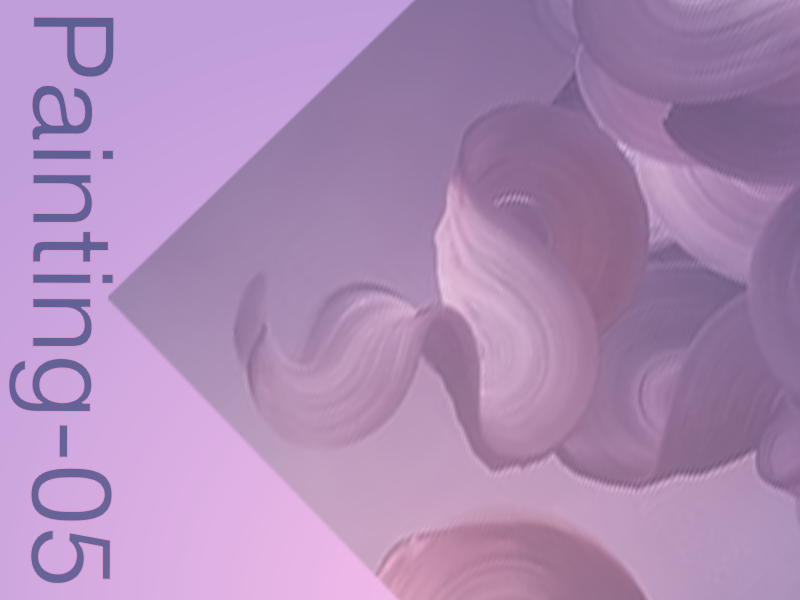
<style>
.page{position:relative;width:800px;height:600px}
.page>*{position:absolute;margin:0}
.t1{font:46.5px "HelveticaNeue";color:#646196}
</style>
<div class="page">
<p class="t1" style="left:8px;top:16px;width:107px;height:568px;rotate:90deg">Painting-05</p>
</div>
